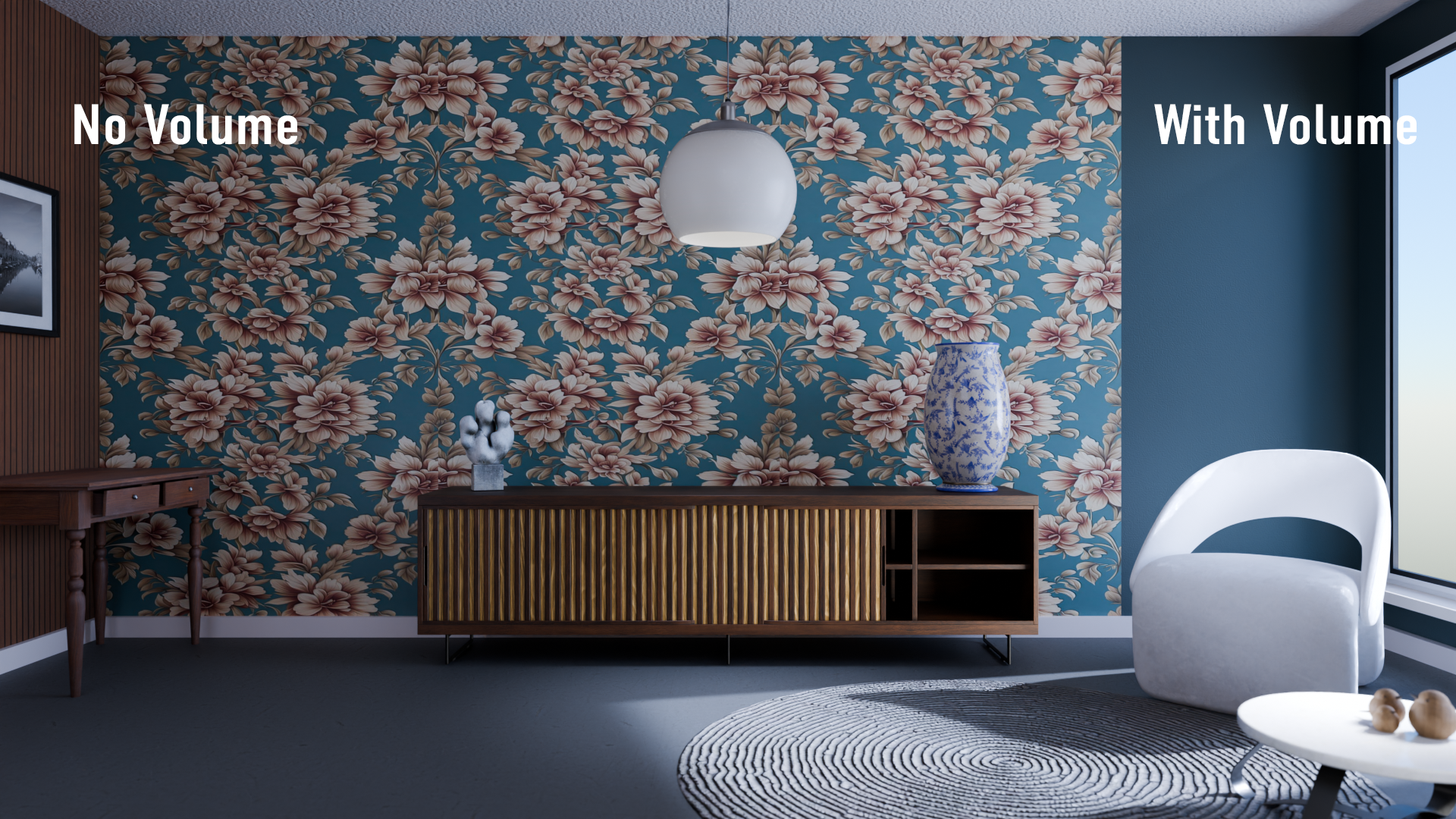
<style>
.page{position:relative;width:1456px;height:819px}
.page>*{position:absolute;margin:0}
.t1{font:56.9px "DINCondensedVF-Regular";color:#ffffff;scale:1.14 1}
</style>
<div class="page">
<p class="t1" style="left:74px;top:104px;width:223px;height:41px">No Volume</p>
<p class="t1" style="left:1154px;top:104px;width:263px;height:41px">With Volume</p>
</div>
